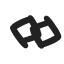
<style>
.page{position:relative;width:64px;height:64px;background:#ffffff}
.page>*{position:absolute;margin:0}
.t1{font:88px "KristenITC-Regular";color:#222222}
</style>
<div class="page">
<p class="t1" style="left:10px;top:16px;width:43px;height:33px;rotate:14deg">«</p>
<p class="t1" style="left:18px;top:15px;width:44px;height:33px;rotate:-164deg">«</p>
</div>
